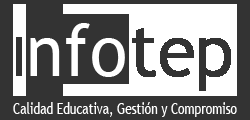
<style>
.page{position:relative;width:250px;height:120px;background:#333333}
.page>*{position:absolute;margin:0}
.t1{font:15.8px "TrebuchetMS";color:#ffffff;scale:0.76 1}
</style>
<div class="page">
<p class="t1" style="left:13px;top:102px;width:224px;height:15px">Calidad Educativa, Gestión y Compromiso</p>
</div>
